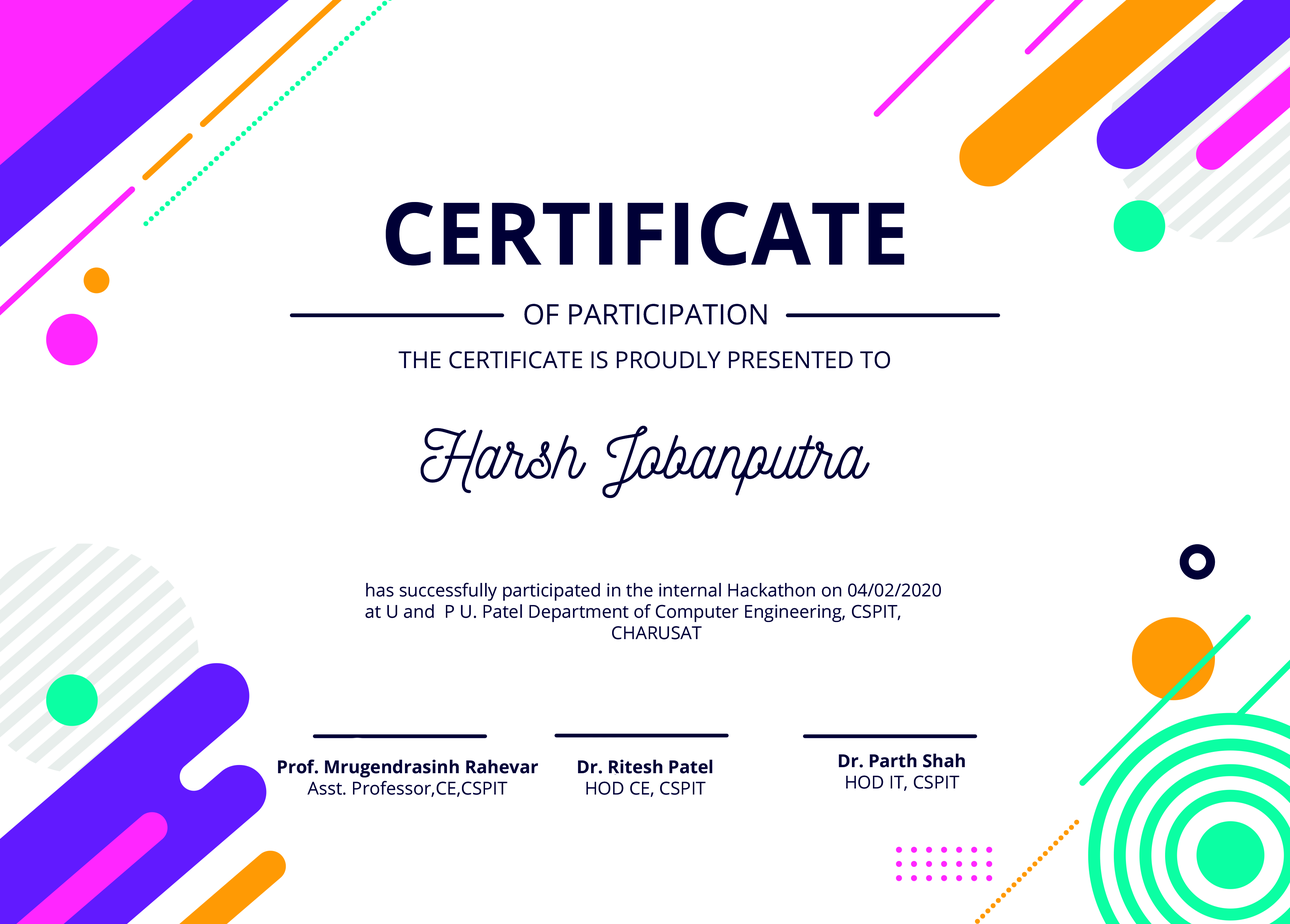
<style>
.page{position:relative;width:1290px;height:924px;background:#ffffff}
.page>*{position:absolute;margin:0}
.t1{font:28.2px "OpenSans-Regular";color:#000036}
.t2{font:17.8px "OpenSans-Regular";color:#000036}
.t3{font:4.3px "OpenSans-Bold";color:#000036}
.t4{font:4.3px "OpenSans-Regular";color:#000036}
.t5{font:17.8px "OpenSans-Bold";color:#000036}
</style>
<div class="page">
<p class="t1" style="left:524px;top:304px;width:242px;height:21px">OF PARTICIPATION</p>
<p class="t2" style="left:365px;top:583px;width:576px;height:57px">has successfully participated in the internal Hackathon on 04/02/2020<br>at U and  P U. Patel Department of Computer Engineering, CSPIT, <br>CHARUSAT</p>
<p class="t3" style="left:278px;top:760px;width:260px;height:37px;text-align:center">Prof. Mrugendrasinh Rahevar<br><span class="t4">Asst. Professor,CE,CSPIT</span></p>
<p class="t5" style="left:578px;top:760px;width:134px;height:37px;text-align:center">Dr. Ritesh Patel <br><span class="t2">HOD CE, CSPIT</span></p>
<p class="t3" style="left:839px;top:754px;width:126px;height:37px;text-align:center">Dr. Parth Shah<br><span class="t4">HOD IT, CSPIT</span></p>
</div>
